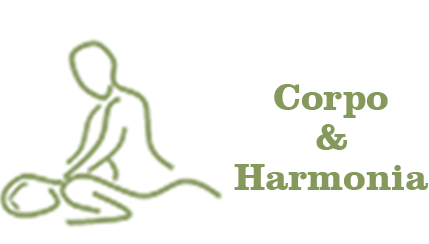
<style>
.page{position:relative;width:429px;height:244px;background:#ffffff}
.page>*{position:absolute;margin:0}
.t1{font:38px "ClarendonBT-Bold";color:#86995d}
</style>
<div class="page">
<p class="t1" style="left:274px;top:84px;width:114px;height:34px">Corpo</p>
<p class="t1" style="left:316px;top:124px;width:32px;height:26px">&amp;</p>
<p class="t1" style="left:234px;top:164px;width:194px;height:26px">Harmonia</p>
</div>
